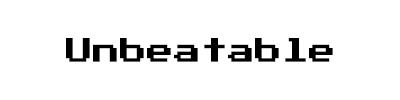
<style>
.page{position:relative;width:400px;height:100px;background:#ffffff}
.page>*{position:absolute;margin:0}
.t1{font:27px "PressStart2P";color:#000000}
</style>
<div class="page">
<p class="t1" style="left:66px;top:38px;width:267px;height:24px">Unbeatable</p>
</div>
